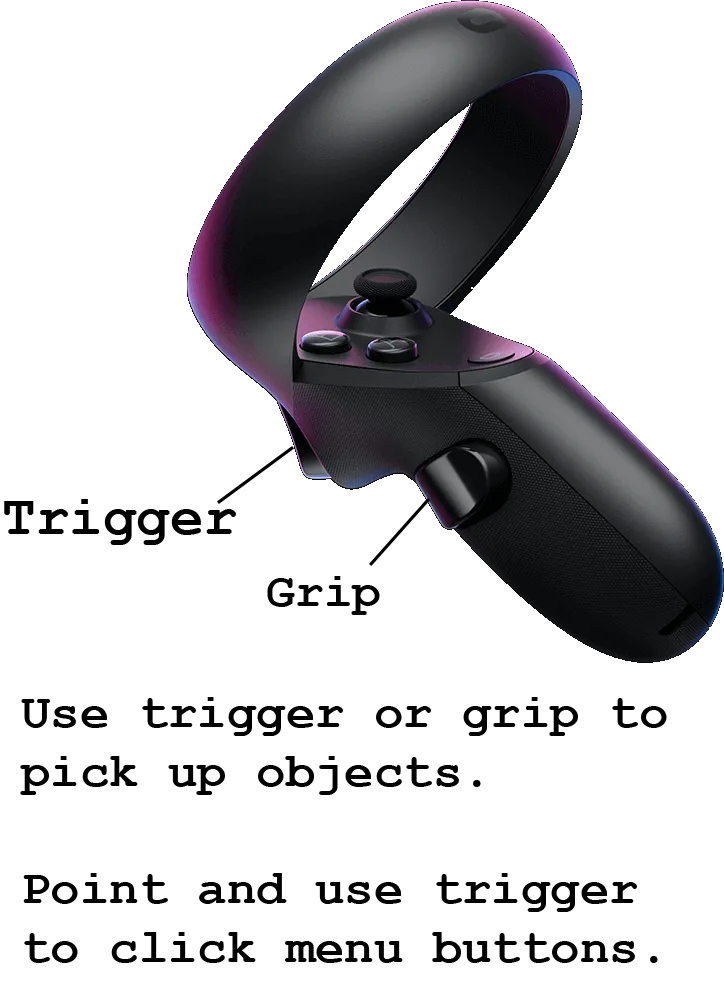
<style>
.page{position:relative;width:724px;height:1000px;background:#ffffff}
.page>*{position:absolute;margin:0}
.t1{font:56px "CourierNewPS-BoldMT";color:#000000}
.t2{font:48px "CourierNewPS-BoldMT";color:#000000}
.t3{font:49px "CourierNewPS-BoldMT";color:#000000}
</style>
<div class="page">
<p class="t1" style="left:4px;top:499px;width:232px;height:46px">Trigger</p>
<p class="t2" style="left:267px;top:576px;width:113px;height:39px">Grip</p>
<p class="t3" style="left:20px;top:697px;width:647px;height:266px">Use trigger or grip to<br>pick up objects.<br><br>Point and use trigger<br>to click menu buttons.</p>
</div>
